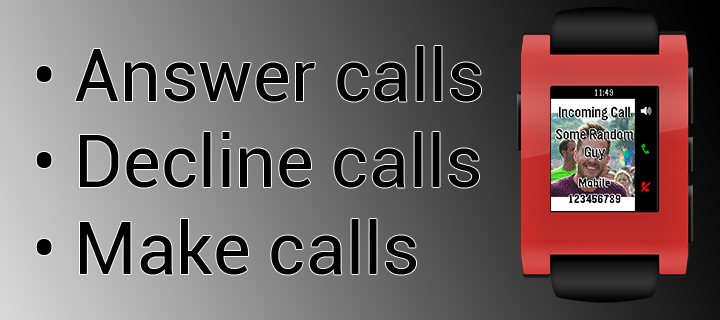
<style>
.page{position:relative;width:720px;height:320px}
.page>*{position:absolute;margin:0}
.t1{font:72px "Roboto-Regular";color:#000000}
</style>
<div class="page">
<p class="t1" style="left:36px;top:46px;width:445px;height:229px">• Answer calls<br>• Decline calls<br>• Make calls</p>
</div>
